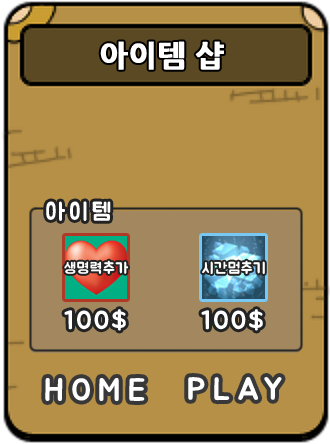
<style>
.page{position:relative;width:330px;height:444px;background:#b69047}
.page>*{position:absolute;margin:0}
.t1{font:24px "BMJUA";letter-spacing:0.16em;color:#ffffff}
.t2{font:15px "BMJUA";letter-spacing:0.06em;color:#ffffff}
.t3{font:26px "BMJUA";letter-spacing:0.06em;color:#ffffff}
.t4{font:32px "BMJUA";letter-spacing:0.22em;color:#ffffff}
</style>
<div class="page">
<p class="t1" style="left:46px;top:201px;width:65px;height:20px">아이템</p>
<p class="t2" style="left:64px;top:260px;width:65px;height:14px">생명력추가</p>
<p class="t2" style="left:202px;top:260px;width:63px;height:15px">시간멈추기</p>
<p class="t3" style="left:64px;top:309px;width:62px;height:22px">100$</p>
<p class="t3" style="left:201px;top:309px;width:62px;height:22px">100$</p>
<p class="t4" style="left:188px;top:377px;width:94px;height:24px">PLAY</p>
<p class="t4" style="left:45px;top:378px;width:100px;height:23px">HOME</p>
</div>
